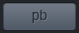
<style>
.page{position:relative;width:79px;height:33px;background:#22252a}
.page>*{position:absolute;margin:0}
.t1{font:14px "ArialMT";color:#2c353f}
</style>
<div class="page">
<p class="t1" style="left:32px;top:10px;width:15px;height:13px">pb</p>
</div>
